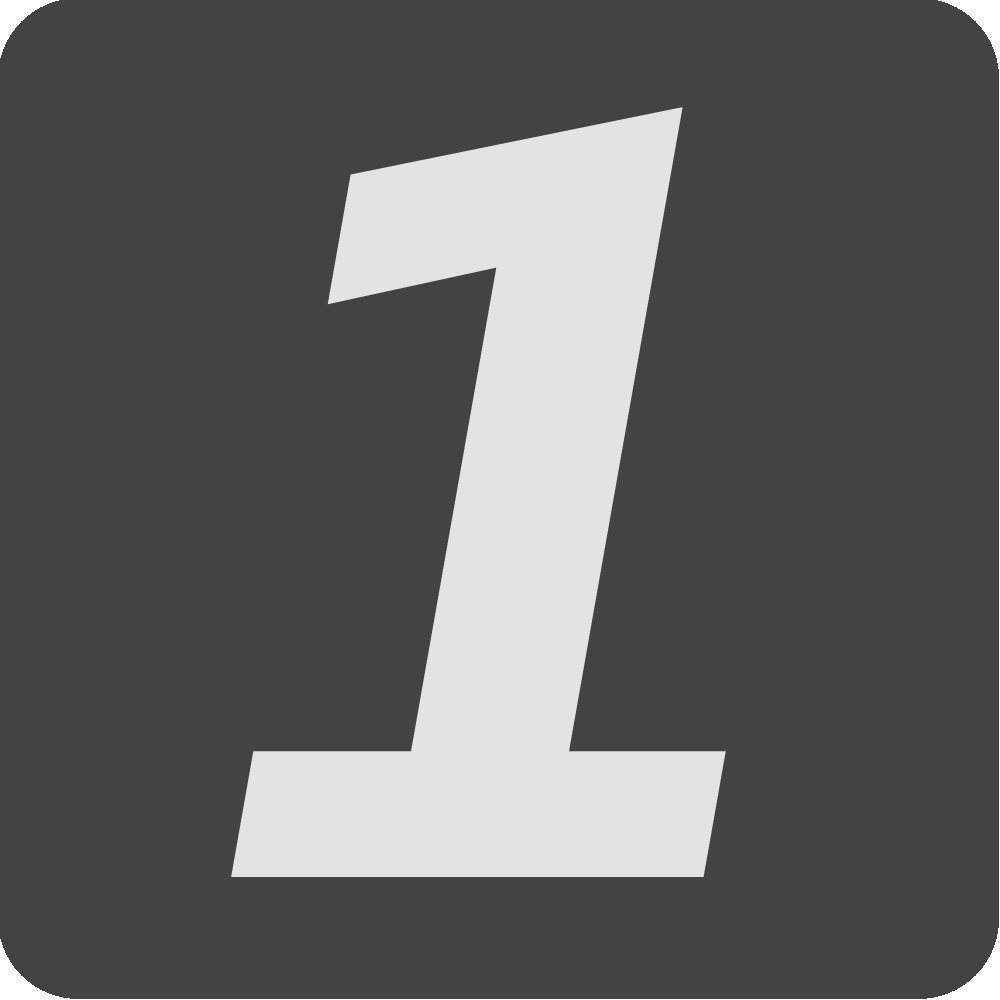
<style>
.page{position:relative;width:1000px;height:1000px;background:#434343}
.page>*{position:absolute;margin:0}
.t1{font:1000px "MicrosoftYaHei-Bold";color:#e3e3e3;text-transform:uppercase;font-style:italic}
</style>
<div class="page">
<p class="t1" style="left:231px;top:107px;width:495px;height:770px">1</p>
</div>
